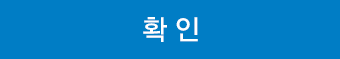
<style>
.page{position:relative;width:340px;height:59px;background:#007dc5}
.page>*{position:absolute;margin:0}
.t1{font:28px "YDVYGO33";letter-spacing:-0.025em;color:#ffffff;scale:0.95 1}
</style>
<div class="page">
<p class="t1" style="left:143px;top:17px;width:55px;height:25px">확 인</p>
</div>
